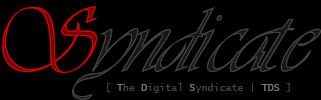
<style>
.page{position:relative;width:321px;height:100px;background:#000000}
.page>*{position:absolute;margin:0}
.t1{font:89.1px "Astrania";scale:0.91 1}
.t2{font:10px "LucidaConsole";color:#414141}
.t3{font:10px "LucidaConsole";color:#767676}
</style>
<div class="page">
<p class="t1" style="left:2px;top:6px;width:95px;height:67px">S</p>
<p class="t1" style="left:72px;top:7px;width:249px;height:93px">yndicate</p>
<p class="t2" style="left:107px;top:83px;width:183px;height:10px">[ <span class="t3">T</span>he <span class="t3">D</span>igital <span class="t3">S</span>yndicate | <span class="t3">TDS</span> ]</p>
</div>
